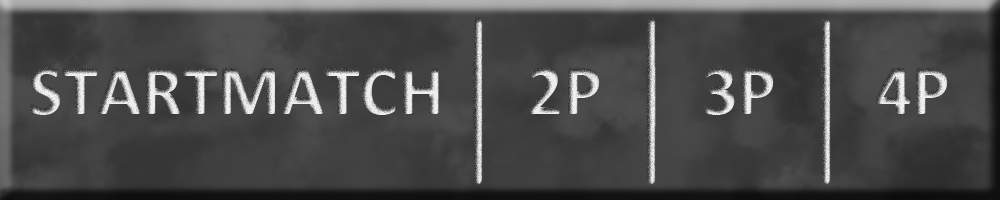
<style>
.page{position:relative;width:1000px;height:200px}
.page>*{position:absolute;margin:0}
.t1{font:72px "Calibri-Bold"}
</style>
<div class="page">
<p class="t1" style="left:30px;top:63px;width:918px;height:64px">STARTMATCH |  2P  |  3P  |  4P</p>
</div>
